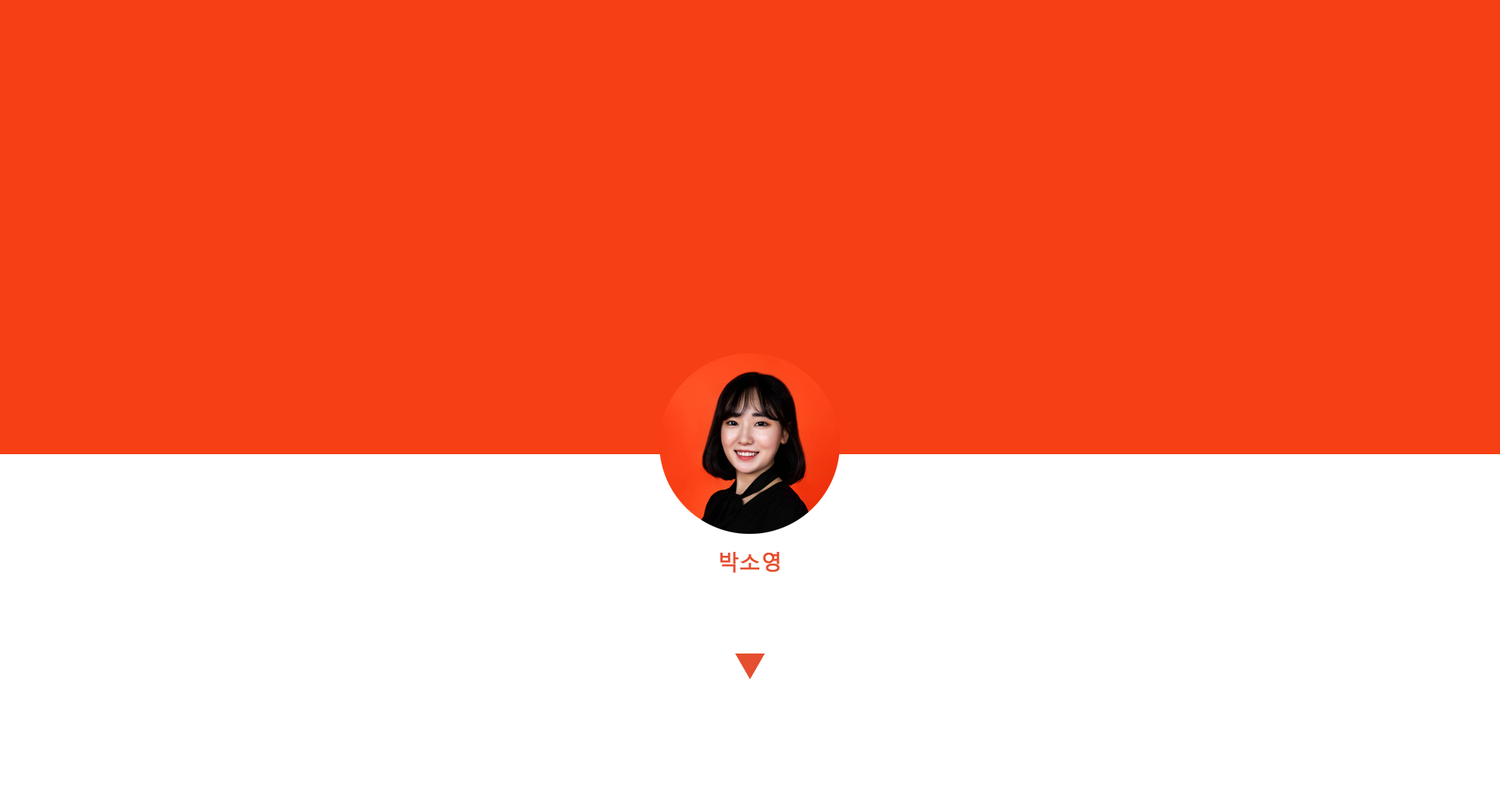
<style>
.page{position:relative;width:1500px;height:795px;background:#f63f14}
.page>*{position:absolute;margin:0}
.t1{font:20.8px "MalgunGothic";color:#e54e2f;font-weight:bold}
</style>
<div class="page">
<p class="t1" style="left:721px;top:552px;width:59px;height:21px">박소영</p>
</div>
